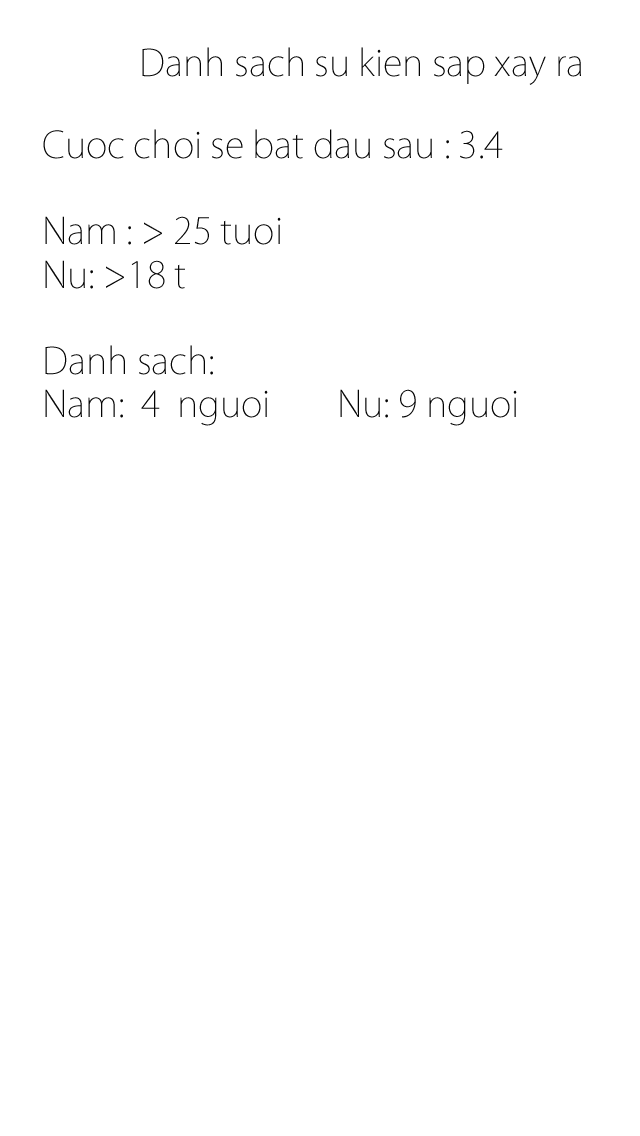
<style>
.page{position:relative;width:640px;height:1136px;background:#ffffff}
.page>*{position:absolute;margin:0}
.t1{font:36px "KozGoPro-ExtraLight";color:#040404}
</style>
<div class="page">
<p class="t1" style="left:142px;top:47px;width:439px;height:38px">Danh sach su kien sap xay ra</p>
<p class="t1" style="left:43px;top:129px;width:474px;height:297px">Cuoc choi se bat dau sau : 3.4<br><br>Nam : &gt; 25 tuoi <br>Nu: &gt;18 t<br><br>Danh sach: <br>Nam:  4  nguoi        Nu: 9 nguoi</p>
</div>
